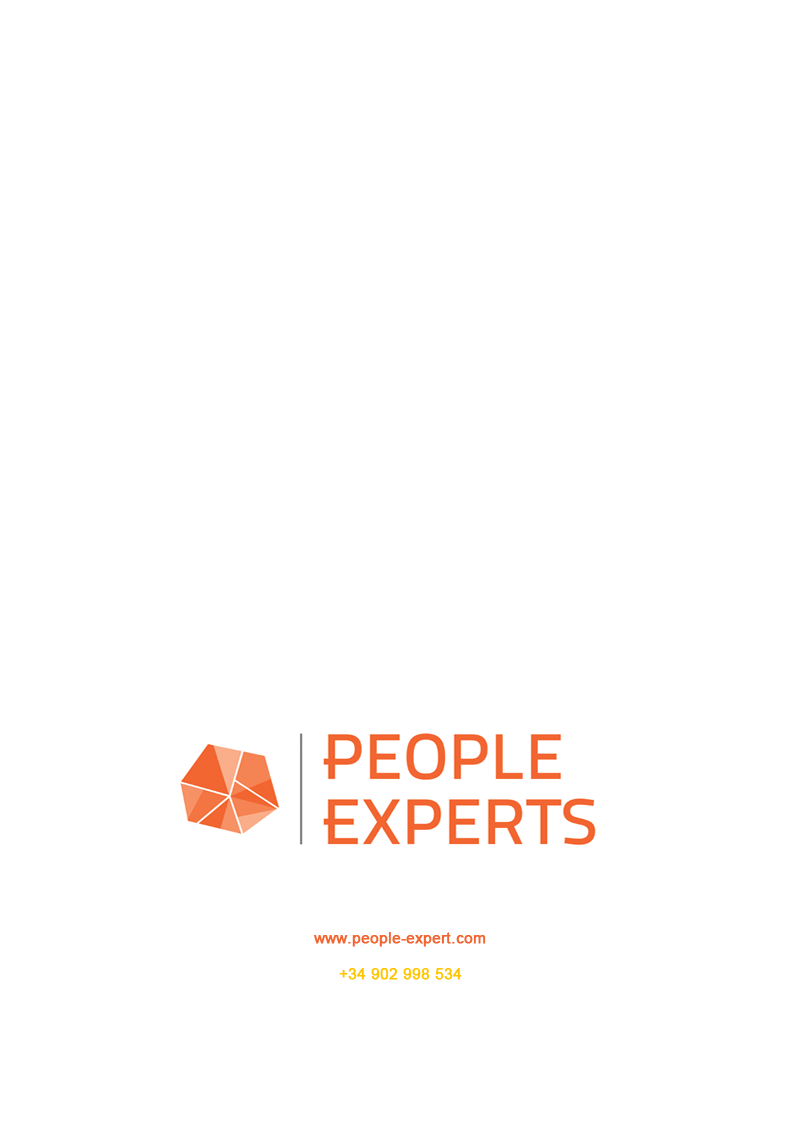
<style>
.page{position:relative;width:794px;height:1123px;background:#ffffff}
.page>*{position:absolute;margin:0}
.t1{font:15px/18px "ArialMT";color:#f26430;font-weight:bold}
.t2{font:15px/18px "ArialMT";color:#ffc500;font-weight:bold}
</style>
<div class="page">
<p class="t1" style="left:314px;top:932px;width:172px;height:48px">www.people-expert.com<br><br><span class="t2">     +34 902 998 534</span></p>
</div>
